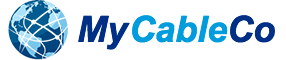
<style>
.page{position:relative;width:286px;height:60px;background:#ffffff}
.page>*{position:absolute;margin:0}
.t1{font:36px "Arial-BoldItalicMT";color:#002f86}
.t2{font:36px "Arial-BoldItalicMT";color:#009cde}
</style>
<div class="page">
<p class="t1" style="left:78px;top:15px;width:52px;height:35px">My</p>
<p class="t2" style="left:132px;top:15px;width:96px;height:28px">Cable</p>
<p class="t1" style="left:230px;top:15px;width:45px;height:28px">Co</p>
</div>
